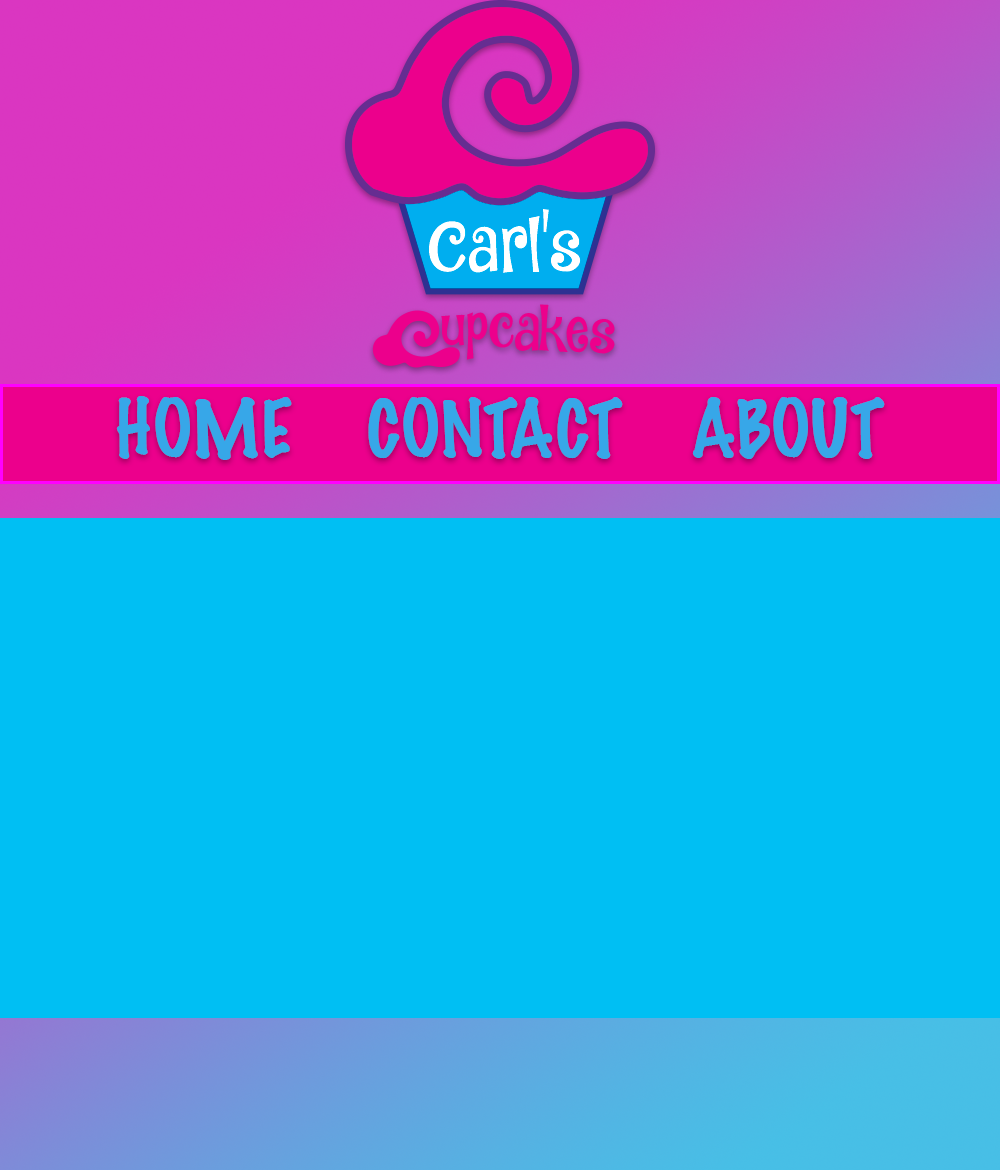
<style>
.page{position:relative;width:1000px;height:1170px;background:#00bff3}
.page>*{position:absolute;margin:0}
.t1{font:72px "MarkerFelt-Thin";color:#37a7e8}
</style>
<div class="page">
<p class="t1" style="left:116px;top:396px;width:769px;height:64px">HOME   CONTACT  ABOUT</p>
</div>
